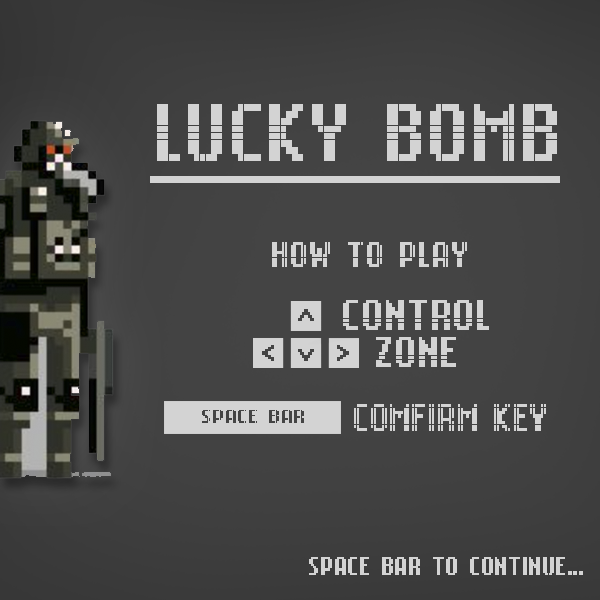
<style>
.page{position:relative;width:600px;height:600px}
.page>*{position:absolute;margin:0}
.t1{font:90px "PSLCD3310";letter-spacing:0.04em;color:#d3d3d3;text-transform:uppercase;text-decoration:underline;scale:0.8 1}
.t2{font:39.5px "PSLCD3310";letter-spacing:0.04em;color:#d3d3d3;text-transform:uppercase;scale:0.8 1}
.t3{font:47.6px/37.1px "PSLCD3310";letter-spacing:0.04em;color:#d3d3d3;text-transform:uppercase;scale:0.8 1}
.t4{font:25.3px "PSLCD3310";letter-spacing:0.04em;color:#444444;text-transform:uppercase;scale:1.48 1}
.t5{font:20.6px "PSLCD3310";letter-spacing:0.04em;color:#444444;text-transform:uppercase}
.t6{font:42.1px "PSLCD3310";letter-spacing:0.02em;color:#d3d3d3;text-transform:uppercase;scale:0.8 1}
.t7{font:28.4px "PSLCD3310";letter-spacing:0.04em;color:#d3d3d3;text-transform:uppercase;scale:0.8 1}
</style>
<div class="page">
<p class="t1" style="left:150px;top:104px;width:410px;height:79px">LUCKY BOMB</p>
<p class="t2" style="left:272px;top:242px;width:195px;height:25px">how to play</p>
<p class="t3" style="left:343px;top:300px;width:146px;height:67px;text-align:center">control<br>Zone</p>
<p class="t4" style="left:298px;top:309px;width:16px;height:12px;rotate:90deg">&lt;</p>
<p class="t4" style="left:262px;top:345px;width:12px;height:16px">&lt;</p>
<p class="t4" style="left:298px;top:349px;width:16px;height:12px;rotate:-90deg">&lt;</p>
<p class="t4" style="left:337px;top:345px;width:12px;height:16px;rotate:180deg">&lt;</p>
<p class="t5" style="left:202px;top:410px;width:102px;height:13px">space bar</p>
<p class="t6" style="left:354px;top:404px;width:192px;height:27px">Comfirm key</p>
<p class="t7" style="left:309px;top:557px;width:274px;height:18px">space bar to continue...</p>
</div>
